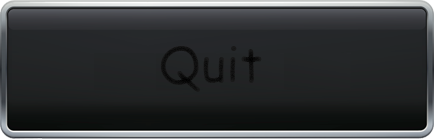
<style>
.page{position:relative;width:434px;height:139px}
.page>*{position:absolute;margin:0}
.t1{font:48px "ComicSansMS";color:#000000}
</style>
<div class="page">
<p class="t1" style="left:160px;top:46px;width:102px;height:46px">Quit</p>
</div>
